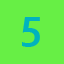
<style>
.page{position:relative;width:64px;height:64px;background:#67ef45}
.page>*{position:absolute;margin:0}
.t1{font:45.3px "Corbel-Bold";color:#00b3be}
</style>
<div class="page">
<p class="t1" style="left:22px;top:17px;width:18px;height:30px">5</p>
</div>
